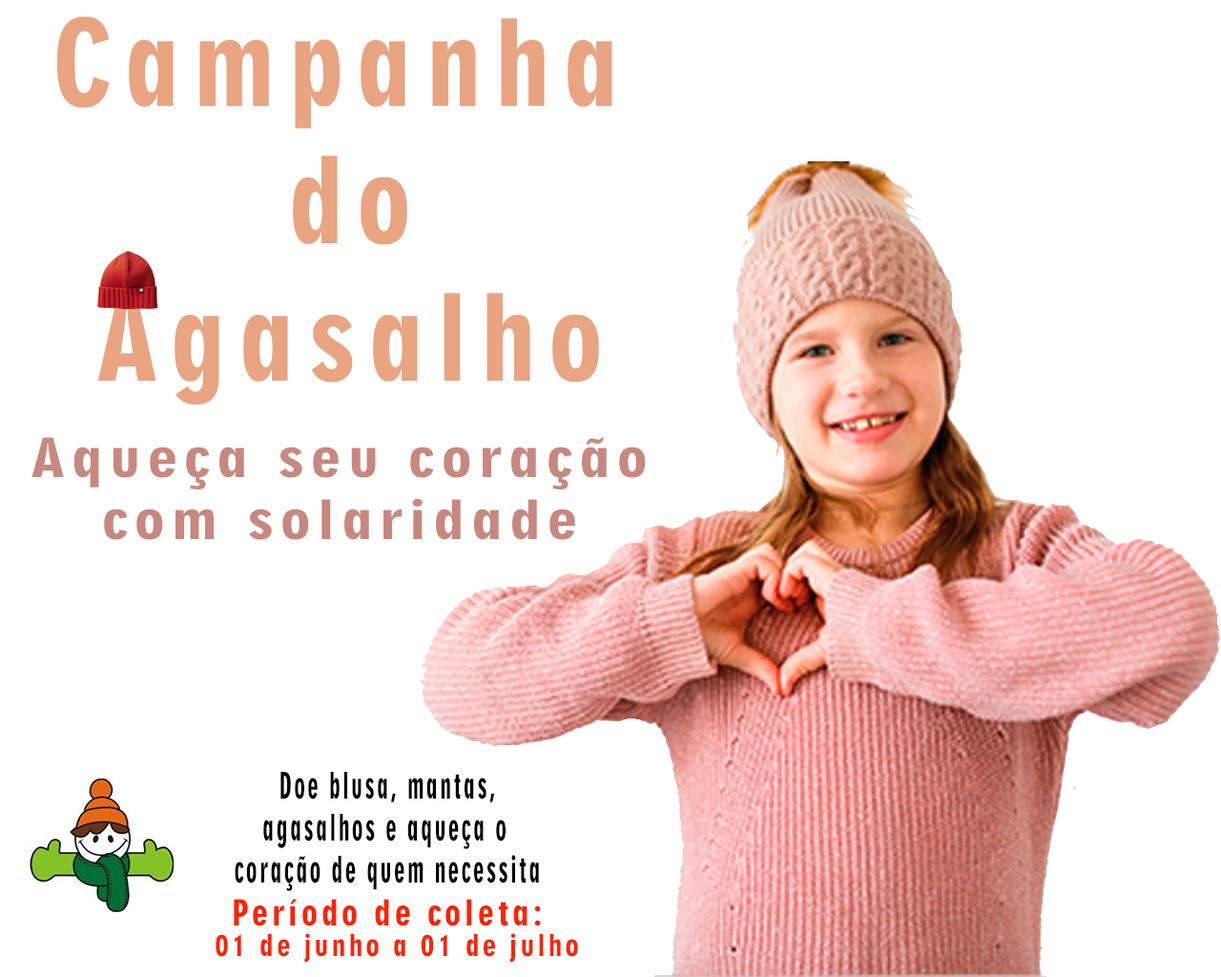
<style>
.page{position:relative;width:1221px;height:977px;background:#ffffff}
.page>*{position:absolute;margin:0}
.t1{font:114.5px "Geometric706BT-BlackCondensedB";letter-spacing:0.11em;color:#e9a481}
.t2{font:51.7px "Geometric706BT-BlackCondensedB";letter-spacing:0.11em;color:#c8887e;scale:1.23 1}
.t3{font:35.1px "Geometric706BT-BlackCondensedB";letter-spacing:0.11em;color:#000000;scale:0.65 1}
.t4{font:34.3px "Geometric706BT-BlackCondensedB";letter-spacing:0.11em;color:#fc2300}
.t5{font:28.6px "Geometric706BT-BlackCondensedB";letter-spacing:0.11em;color:#fc2300}
</style>
<div class="page">
<p class="t1" style="left:57px;top:16px;width:555px;height:388px;text-align:center">Campanha <br>do<br>Agasalho</p>
<p class="t2" style="left:31px;top:437px;width:615px;height:103px;text-align:center">Aqueça seu coração<br>com solaridade</p>
<p class="t3" style="left:235px;top:772px;width:304px;height:119px;text-align:center">Doe blusa, mantas,<br>agasalhos e aqueça o <br>coração de quem necessita</p>
<p class="t4" style="left:234px;top:898px;width:307px;height:28px">Período de coleta:</p>
<p class="t5" style="left:216px;top:933px;width:362px;height:29px">01 de junho a 01 de julho</p>
</div>
